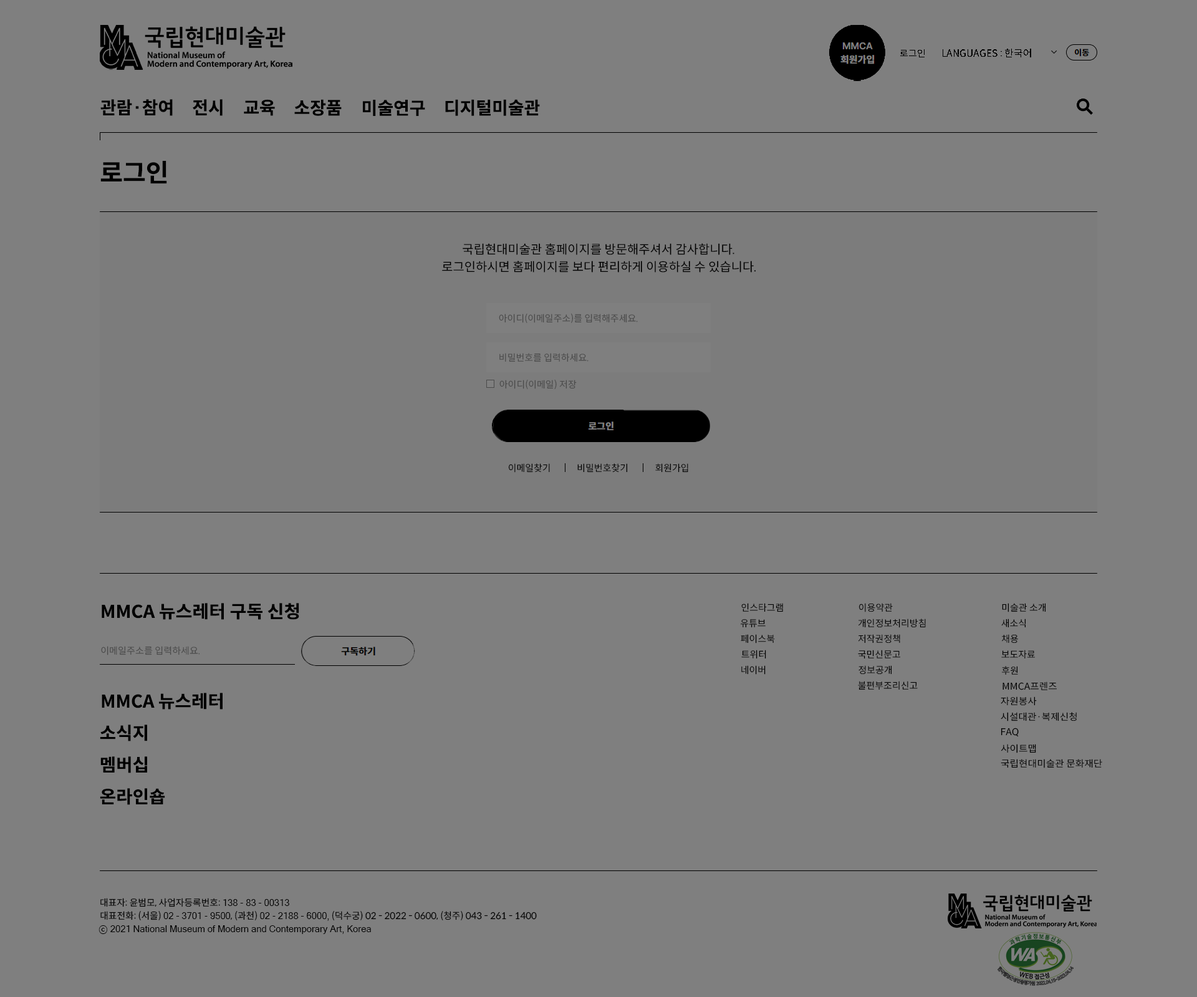
<style>
.page{position:relative;width:1197px;height:997px;background:#7f7f7f}
.page>*{position:absolute;margin:0}
.t1{font:9.3px "SpoqaHanSansNeo-Regular";color:#000000}
.t2{font:9.8px "SpoqaHanSansNeo-Regular";color:#000000}
.t3{font:17.5px "SpoqaHanSansNeo-Bold";color:#000000}
.t4{font:24.9px "SpoqaHanSansNeo-Bold";color:#000000}
.t5{font:12.4px "SpoqaHanSansNeo-Regular";color:#000000}
.t6{font:9.3px "SpoqaHanSansNeo-Regular";color:#4a4a4a}
.t7{font:17.5px "SpoqaHanSansNeo-Bold";color:#000000;scale:1.04 1}
.t8{font:9.3px "SpoqaHanSansNeo-Regular";color:#000000;scale:1.05 1}
.t9{font:17.5px "SpoqaHanSansNeo-Bold";color:#000000;scale:1.05 1}
.t10{font:9.2px "SpoqaHanSansNeo-Regular";color:#000000}
.t11{font:9.2px "MicrosoftSansSerif";color:#000000}
.t12{font:9.2px "MalgunGothic";color:#000000}
</style>
<div class="page">
<p class="t1" style="left:900px;top:49px;width:24px;height:8px">로그인</p>
<p class="t2" style="left:942px;top:49px;width:89px;height:8px">LANGUAGES : 한국어</p>
<p class="t3" style="left:100px;top:99px;width:73px;height:17px">관람·참여</p>
<p class="t3" style="left:193px;top:99px;width:29px;height:17px">전시</p>
<p class="t3" style="left:244px;top:99px;width:31px;height:17px">교육</p>
<p class="t3" style="left:294px;top:99px;width:48px;height:17px">소장품</p>
<p class="t3" style="left:363px;top:100px;width:62px;height:16px">미술연구</p>
<p class="t3" style="left:445px;top:99px;width:95px;height:17px">디지털미술관</p>
<p class="t4" style="left:100px;top:161px;width:67px;height:23px">로그인</p>
<p class="t5" style="left:462px;top:243px;width:272px;height:12px">국립현대미술관 홈페이지를 방문해주셔서 감사합니다.</p>
<p class="t5" style="left:442px;top:261px;width:314px;height:11px">로그인하시면 홈페이지를 보다 편리하게 이용하실 수 있습니다.</p>
<p class="t6" style="left:499px;top:313px;width:139px;height:10px">아이디(이메일주소)를 입력해주세요.</p>
<p class="t6" style="left:499px;top:353px;width:89px;height:9px">비밀번호를 입력하세요.</p>
<p class="t6" style="left:499px;top:380px;width:77px;height:10px">아이디(이메일) 저장</p>
<p class="t1" style="left:508px;top:463px;width:42px;height:9px">이메일찾기</p>
<p class="t1" style="left:577px;top:463px;width:51px;height:9px">비밀번호찾기</p>
<p class="t1" style="left:655px;top:463px;width:33px;height:9px">회원가입</p>
<p class="t7" style="left:102px;top:603px;width:197px;height:16px">MMCA 뉴스레터 구독 신청</p>
<p class="t1" style="left:741px;top:603px;width:42px;height:9px">인스타그램</p>
<p class="t1" style="left:858px;top:603px;width:34px;height:9px">이용약관</p>
<p class="t1" style="left:1002px;top:603px;width:44px;height:9px">미술관 소개</p>
<p class="t1" style="left:740px;top:619px;width:25px;height:9px">유튜브</p>
<p class="t1" style="left:858px;top:618px;width:67px;height:10px">개인정보처리방침</p>
<p class="t1" style="left:1001px;top:618px;width:25px;height:10px">새소식</p>
<p class="t1" style="left:740px;top:634px;width:35px;height:9px">페이스북</p>
<p class="t1" style="left:858px;top:634px;width:42px;height:9px">저작권정책</p>
<p class="t1" style="left:1002px;top:634px;width:16px;height:9px">채용</p>
<p class="t6" style="left:101px;top:646px;width:99px;height:9px">이메일주소를 입력하세요.</p>
<p class="t1" style="left:741px;top:649px;width:25px;height:10px">트위터</p>
<p class="t1" style="left:858px;top:649px;width:42px;height:10px">국민신문고</p>
<p class="t1" style="left:1001px;top:649px;width:34px;height:9px">보도자료</p>
<p class="t1" style="left:741px;top:665px;width:24px;height:9px">네이버</p>
<p class="t1" style="left:858px;top:665px;width:34px;height:9px">정보공개</p>
<p class="t1" style="left:1002px;top:666px;width:16px;height:8px">후원</p>
<p class="t1" style="left:858px;top:681px;width:59px;height:9px">불편부조리신고</p>
<p class="t8" style="left:1002px;top:681px;width:54px;height:9px">MMCA프렌즈</p>
<p class="t3" style="left:102px;top:692px;width:120px;height:17px">MMCA 뉴스레터</p>
<p class="t8" style="left:1000px;top:696px;width:36px;height:9px">자원봉사</p>
<p class="t8" style="left:1000px;top:712px;width:76px;height:9px">시설대관·복제신청···<span class="t9">···</span></p>
<p class="t3" style="left:100px;top:724px;width:47px;height:17px">소식지</p>
<p class="t8" style="left:1000px;top:727px;width:18px;height:10px">FAQ</p>
<p class="t8" style="left:1000px;top:744px;width:36px;height:9px">사이트맵</p>
<p class="t3" style="left:100px;top:756px;width:47px;height:17px">멤버십</p>
<p class="t8" style="left:1000px;top:758px;width:102px;height:10px">국립현대미술관 문화재단</p>
<p class="t3" style="left:100px;top:788px;width:65px;height:17px">온라인숍</p>
<p class="t10" style="left:100px;top:897px;width:189px;height:10px">대표자: 윤범모, 사업자등록번호: <span class="t11">138 - 83 - 00313</span></p>
<p class="t10" style="left:100px;top:911px;width:437px;height:9px">대표전화: (서울) <span class="t11">02 - 3701 - 9500</span>, (과천) <span class="t11">02 - 2188 - 6000,</span> (덕수궁) 02 - 2022 - 0600, (청주) 043 - 261 - 1400</p>
<p class="t11" style="left:98px;top:924px;width:273px;height:10px"><span class="t12">ⓒ</span> 2021 National Museum of Modern and Contemporary Art, Korea</p>
</div>
